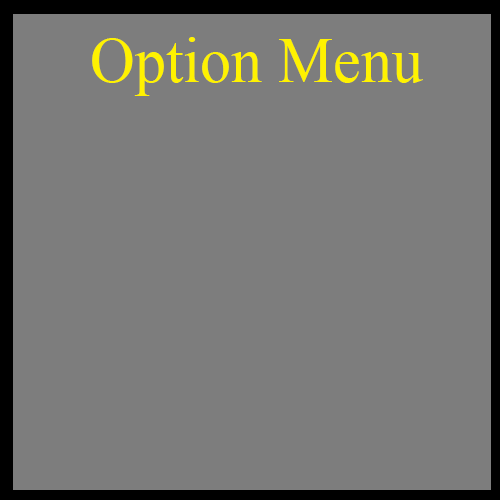
<style>
.page{position:relative;width:500px;height:500px;background:#7d7d7d}
.page>*{position:absolute;margin:0}
.t1{font:65.3px "TimesNewRomanPSMT";color:#fff200;scale:0.95 1}
</style>
<div class="page">
<p class="t1" style="left:92px;top:37px;width:331px;height:59px">Option Menu</p>
</div>
